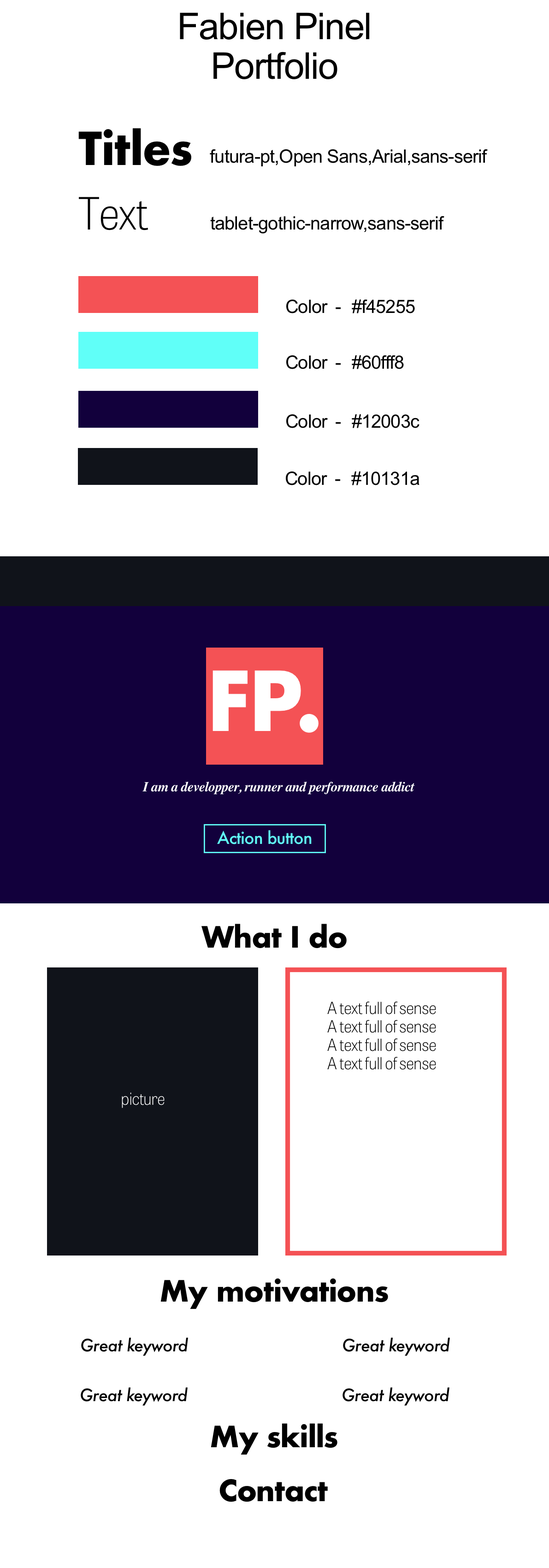
<style>
.page{position:relative;width:549px;height:1568px;background:#ffffff}
.page>*{position:absolute;margin:0}
.t1{font:36.9px/39.8px "ArialMT";letter-spacing:-0.025em;color:#000000}
.t2{font:44.2px "Futura-Bold";letter-spacing:-0.025em;color:#000000}
.t3{font:18.4px "ArialMT";letter-spacing:-0.025em;color:#000000}
.t4{font:44.2px "TabletGothicNarrowW01-Thin";letter-spacing:-0.025em;color:#000000}
.t5{font:80.2px "Futura-Bold";letter-spacing:-0.025em;color:#ffffff}
.t6{font:13.8px "Times-BoldItalic";letter-spacing:-0.025em;color:#ffffff}
.t7{font:16.6px "Futura-Medium";letter-spacing:-0.025em;color:#60fff8}
.t8{font:28.6px "Futura-Bold";letter-spacing:-0.025em;color:#000000}
.t9{font:16.6px/18.4px "TabletGothicNarrowW01-Thin";letter-spacing:-0.025em;color:#000000}
.t10{font:16.6px "TabletGothicNarrowW01-Thin";letter-spacing:-0.025em;color:#ffffff}
.t11{font:16.6px "Futura-MediumItalic";letter-spacing:-0.025em;color:#000000}
</style>
<div class="page">
<p class="t1" style="left:180px;top:12px;width:190px;height:67px;text-align:center">Fabien Pinel <br>Portfolio</p>
<p class="t2" style="left:78px;top:128px;width:113px;height:38px">Titles</p>
<p class="t3" style="left:210px;top:149px;width:278px;height:17px">futura-pt,Open Sans,Arial,sans-serif</p>
<p class="t4" style="left:79px;top:197px;width:69px;height:33px">Text</p>
<p class="t3" style="left:210px;top:216px;width:234px;height:18px">tablet-gothic-narrow,sans-serif</p>
<p class="t3" style="left:286px;top:299px;width:129px;height:14px">Color - #f45255</p>
<p class="t3" style="left:286px;top:355px;width:118px;height:14px">Color - #60fff8</p>
<p class="t3" style="left:286px;top:414px;width:133px;height:14px">Color - #12003c</p>
<p class="t3" style="left:286px;top:471px;width:133px;height:14px">Color - #10131a</p>
<p class="t5" style="left:212px;top:670px;width:106px;height:63px">FP.</p>
<p class="t6" style="left:142px;top:782px;width:273px;height:13px">I am a developper, runner and performance addict</p>
<p class="t7" style="left:217px;top:830px;width:95px;height:14px">Action button</p>
<p class="t8" style="left:201px;top:924px;width:146px;height:25px">What I do</p>
<p class="t9" style="left:327px;top:1002px;width:109px;height:68px;text-align:center">A text full of sense<br>A text full of sense<br>A text full of sense<br>A text full of sense</p>
<p class="t10" style="left:122px;top:1092px;width:43px;height:16px">picture</p>
<p class="t8" style="left:160px;top:1278px;width:228px;height:31px">My motivations</p>
<p class="t11" style="left:81px;top:1338px;width:107px;height:18px">Great keyword</p>
<p class="t11" style="left:343px;top:1338px;width:107px;height:18px">Great keyword</p>
<p class="t11" style="left:81px;top:1387px;width:107px;height:19px">Great keyword</p>
<p class="t11" style="left:342px;top:1387px;width:107px;height:19px">Great keyword</p>
<p class="t8" style="left:211px;top:1423px;width:126px;height:32px">My skills</p>
<p class="t8" style="left:219px;top:1479px;width:109px;height:23px">Contact</p>
</div>
